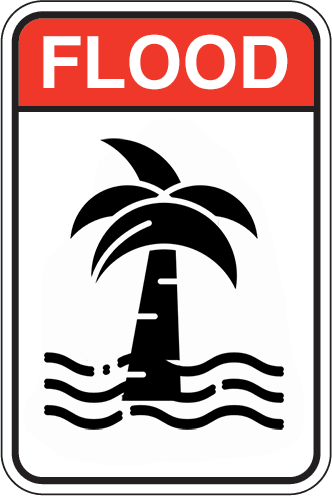
<style>
.page{position:relative;width:332px;height:496px;background:#ffffff}
.page>*{position:absolute;margin:0}
.t1{font:72px "Helvetica-Bold";color:#ffffff}
</style>
<div class="page">
<p class="t1" style="left:43px;top:34px;width:245px;height:56px">FLOOD</p>
</div>
